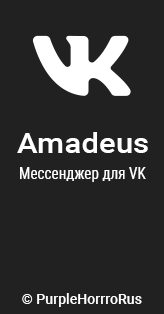
<style>
.page{position:relative;width:164px;height:314px;background:#212121}
.page>*{position:absolute;margin:0}
.t1{font:28.2px "Roboto-Medium";color:#ffffff;scale:1.11 1}
.t2{font:15.6px "RobotoCondensed-Regular";color:#ffffff;scale:0.97 1}
.t3{font:14.1px "Roboto-Medium";color:#ffffff}
</style>
<div class="page">
<p class="t1" style="left:17px;top:132px;width:131px;height:21px">Amadeus</p>
<p class="t2" style="left:20px;top:167px;width:126px;height:15px">Мессенджер для VK</p>
<p class="t3" style="left:22px;top:293px;width:120px;height:14px">© PurpleHorrroRus</p>
</div>
